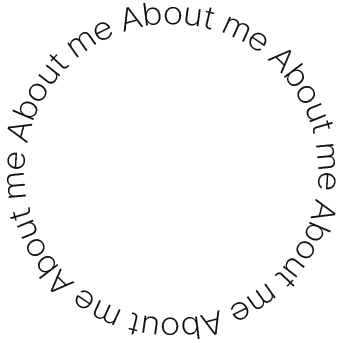
<style>
.page{position:relative;width:344px;height:343px;background:#ffffff}
.page>*{position:absolute;margin:0}
.t1{font:32px/12.2px "Pretendard-ExtraLight";letter-spacing:-0.01em;color:#111111;scale:1.11 1}
</style>
<div class="page">
<p class="t1" style="left:7px;top:3px;width:329px;height:336px">About me About me About me About me About me About me</p>
</div>
